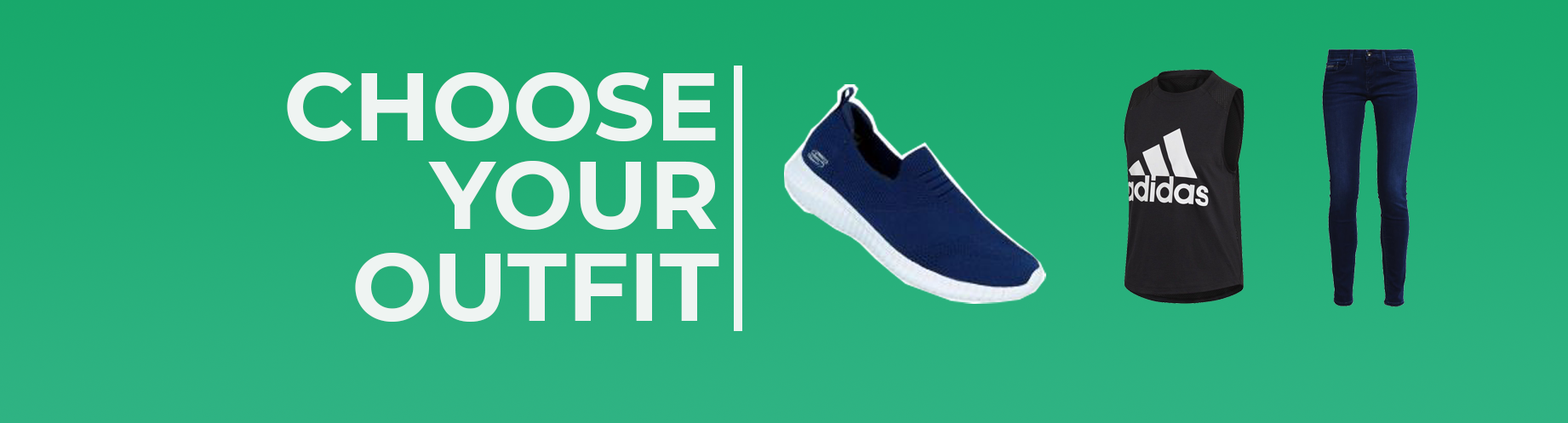
<style>
.page{position:relative;width:1568px;height:423px}
.page>*{position:absolute;margin:0}
.t1{font:96.2px "Montserrat-Bold";color:#eff4f2}
</style>
<div class="page">
<p class="t1" style="left:287px;top:72px;width:429px;height:70px">CHOOSE</p>
<p class="t1" style="left:428px;top:161px;width:289px;height:69px">YOUR</p>
<p class="t1" style="left:355px;top:253px;width:364px;height:69px">OUTFIT</p>
</div>
